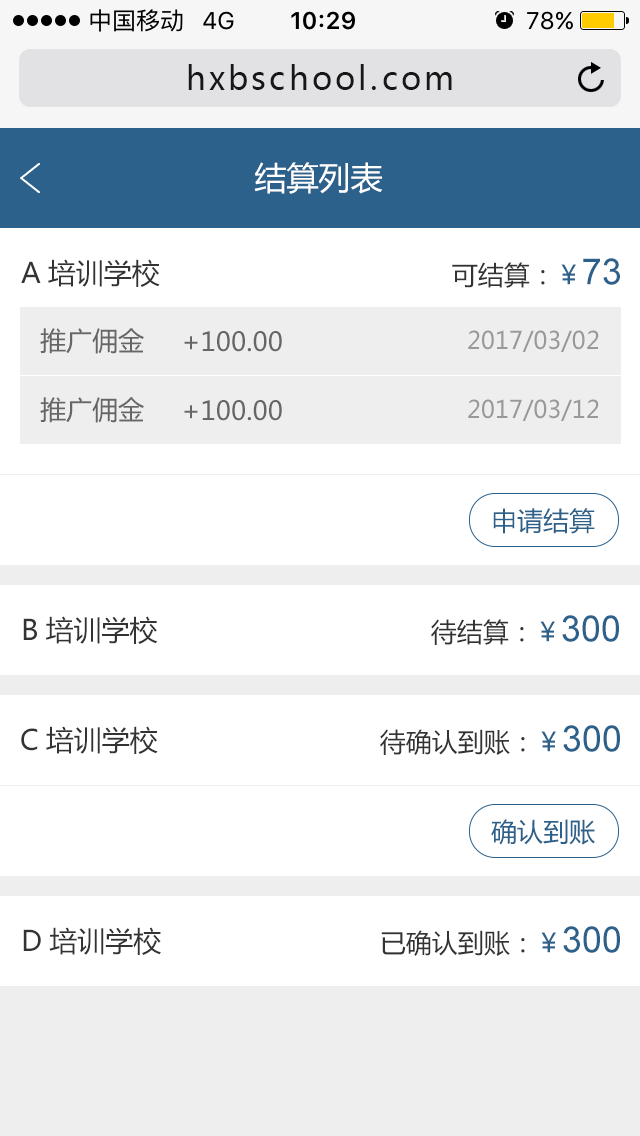
<style>
.page{position:relative;width:640px;height:1136px;background:#ffffff}
.page>*{position:absolute;margin:0}
.t1{font:32px "MicrosoftYaHei";letter-spacing:0.1em;color:#171717}
.t2{font:32px "MicrosoftYaHei";color:#ffffff}
.t3{font:28px "MicrosoftYaHei";color:#333333}
.t4{font:26px "MicrosoftYaHei";color:#333333}
.t5{font:26px "MicrosoftYaHei";color:#2c618b}
.t6{font:36px "ArialMT";color:#2c618b}
.t7{font:26px "MicrosoftYaHei";color:#666666}
.t8{font:24px "MicrosoftYaHei";color:#999999}
</style>
<div class="page">
<p class="t1" style="left:188px;top:64px;width:264px;height:26px">hxbschool.com</p>
<p class="t2" style="left:254px;top:162px;width:129px;height:32px">结算列表</p>
<p class="t3" style="left:21px;top:259px;width:139px;height:28px">A培训学校</p>
<p class="t4" style="left:452px;top:258px;width:168px;height:30px">可结算：<span class="t5">￥</span><span class="t6">73</span></p>
<p class="t7" style="left:40px;top:328px;width:104px;height:26px">推广佣金</p>
<p class="t7" style="left:184px;top:331px;width:98px;height:21px">+100.00</p>
<p class="t8" style="left:468px;top:330px;width:131px;height:22px">2017/03/02</p>
<p class="t7" style="left:40px;top:397px;width:104px;height:26px">推广佣金</p>
<p class="t7" style="left:184px;top:400px;width:98px;height:21px">+100.00</p>
<p class="t8" style="left:468px;top:399px;width:131px;height:22px">2017/03/12</p>
<p class="t5" style="left:493px;top:508px;width:102px;height:26px">申请结算</p>
<p class="t3" style="left:23px;top:616px;width:135px;height:28px">B培训学校</p>
<p class="t4" style="left:431px;top:615px;width:188px;height:30px">待结算：<span class="t5">￥</span><span class="t6">300</span></p>
<p class="t3" style="left:21px;top:726px;width:137px;height:28px">C培训学校</p>
<p class="t4" style="left:380px;top:725px;width:240px;height:30px">待确认到账：<span class="t5">￥</span><span class="t6">300</span></p>
<p class="t5" style="left:491px;top:819px;width:104px;height:26px">确认到账</p>
<p class="t3" style="left:23px;top:927px;width:138px;height:28px">D培训学校</p>
<p class="t4" style="left:381px;top:926px;width:239px;height:30px">已确认到账：<span class="t5">￥</span><span class="t6">300</span></p>
</div>
